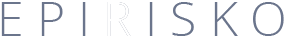
<style>
.page{position:relative;width:300px;height:38px;background:#ffffff}
.page>*{position:absolute;margin:0}
.t1{font:48px "OpenSans-Light";letter-spacing:0.3em;color:#6b758c}
</style>
<div class="page">
<p class="t1" style="left:1px;top:2px;width:283px;height:34px">EPIRISKO</p>
</div>
